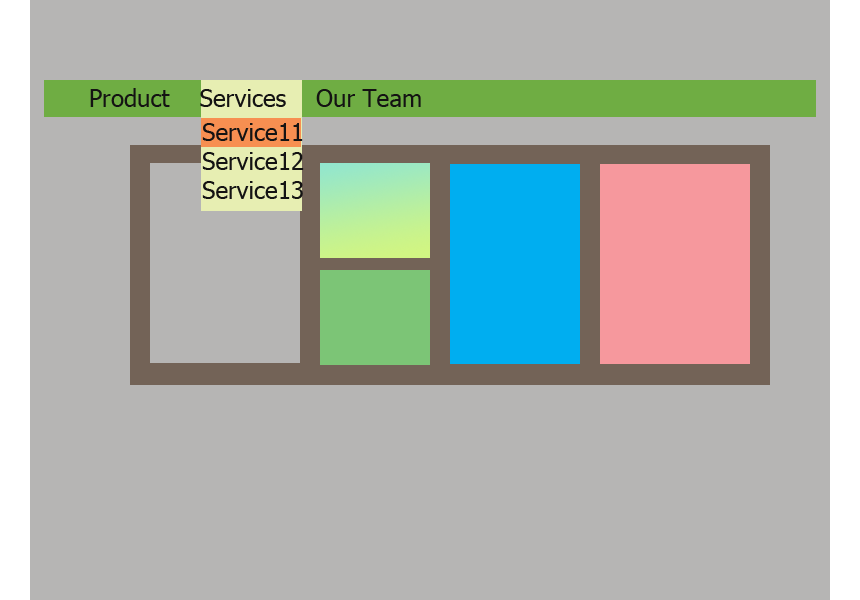
<style>
.page{position:relative;width:860px;height:600px;background:#b6b5b4}
.page>*{position:absolute;margin:0}
.t1{font:24px "Tahoma";color:#141313}
</style>
<div class="page">
<p class="t1" style="left:90px;top:88px;width:331px;height:19px">Product    Services    Our Team</p>
<p class="t1" style="left:202px;top:123px;width:102px;height:76px">Service11<br>Service12<br>Service13</p>
</div>
